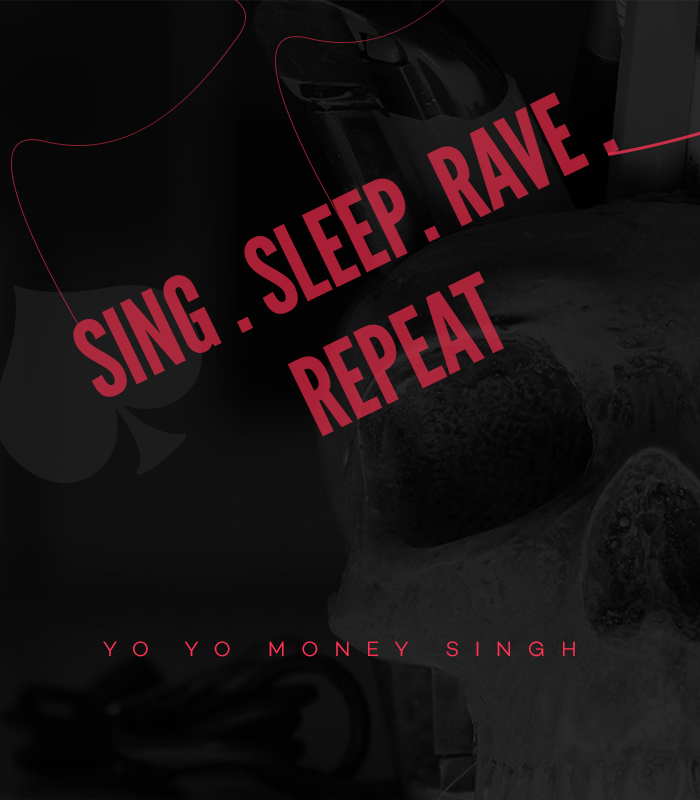
<style>
.page{position:relative;width:700px;height:800px}
.page>*{position:absolute;margin:0}
.t1{font:108.5px "LeagueGothic-Regular";color:#ab253b;text-transform:uppercase}
.t2{font:21px "Campton-LightDEMO";letter-spacing:0.74em;color:#ff3355;text-transform:uppercase}
</style>
<div class="page">
<p class="t1" style="left:73px;top:92px;width:546px;height:345px;rotate:-26deg">Sing . Sleep. Rave . Repeat</p>
<p class="t2" style="left:103px;top:641px;width:472px;height:16px">Yo Yo Money Singh</p>
</div>
